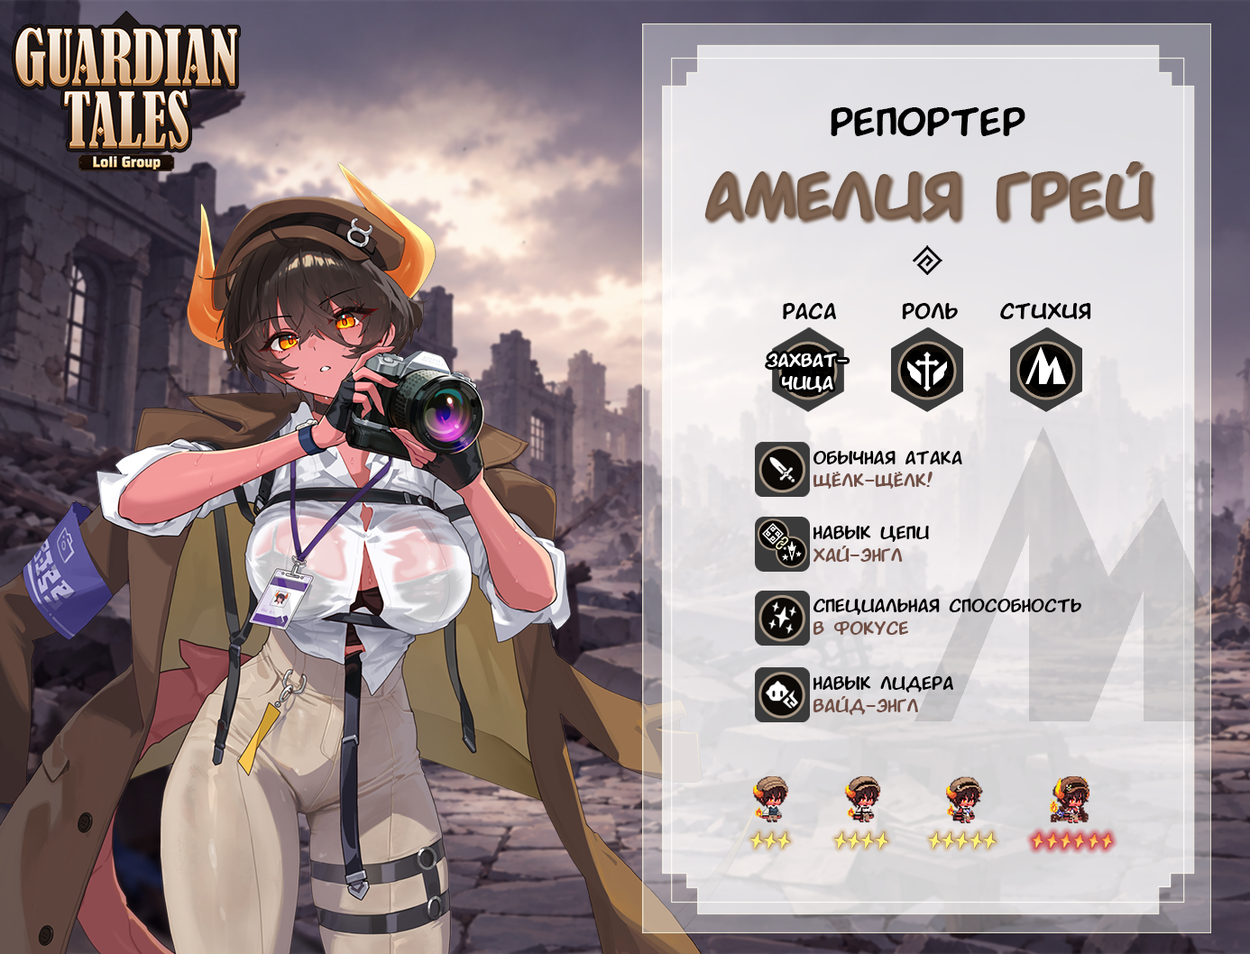
<style>
.page{position:relative;width:1250px;height:954px}
.page>*{position:absolute;margin:0}
.t1{font:41.3px "MPMangaFontBold";color:#000000}
.t2{font:67.6px "MPMangaFontBold";color:#816653}
.t3{font:22.5px "MPMangaFontBold";color:#000000}
.t4{font:18.8px "MPMangaFontBold";color:#ffffff}
.t5{font:18.8px "MPMangaFontBold";color:#000000}
.t6{font:18.8px "MPMangaFontBold";color:#714f45}
</style>
<div class="page">
<p class="t1" style="left:831px;top:107px;width:194px;height:29px">Репортер</p>
<p class="t2" style="left:704px;top:161px;width:447px;height:58px">Амелия Грей</p>
<p class="t3" style="left:783px;top:303px;width:53px;height:16px">раса</p>
<p class="t3" style="left:902px;top:303px;width:56px;height:16px">роль</p>
<p class="t3" style="left:1000px;top:303px;width:91px;height:16px">стихия</p>
<p class="t4" style="left:767px;top:353px;width:81px;height:39px;text-align:center">захват-<br>чица</p>
<p class="t5" style="left:813px;top:451px;width:149px;height:38px">обычная атака<br><span class="t6">Щёлк-щёлк!</span></p>
<p class="t5" style="left:813px;top:526px;width:116px;height:36px">навык цепи<br><span class="t6">Хай-энгл</span></p>
<p class="t5" style="left:813px;top:599px;width:268px;height:36px">специальная способность<br><span class="t6">В фокусе</span></p>
<p class="t5" style="left:813px;top:676px;width:140px;height:39px">навык лидера<br><span class="t6">Вайд-энгл</span></p>
</div>
